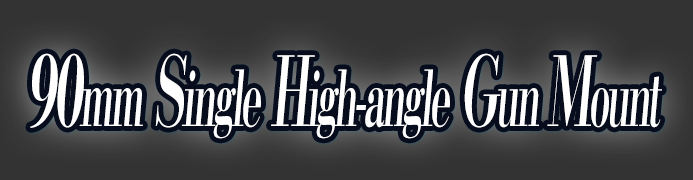
<style>
.page{position:relative;width:693px;height:180px;background:#333333}
.page>*{position:absolute;margin:0}
.t1{font:76.8px "KochoStd-Heavy";letter-spacing:-0.08em;color:#ffffff;font-style:italic;scale:0.5 1}
.t2{font:96px "KochoStd-Heavy";letter-spacing:-0.08em;color:#ffffff;font-style:italic;scale:0.5 1}
</style>
<div class="page">
<p class="t1" style="left:30px;top:53px;width:632px;height:86px"><span class="t2">90</span>mm<span class="t2"> S</span>ingle<span class="t2"> H</span>igh-angle<span class="t2"> G</span>un <span class="t2">M</span>ount</p>
</div>
